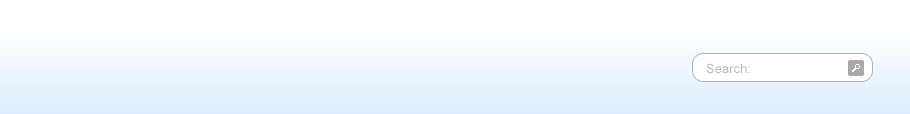
<style>
.page{position:relative;width:910px;height:114px;background:#ffffff}
.page>*{position:absolute;margin:0}
.t1{font:12.5px "ArialMT";letter-spacing:0.025em;color:#b6b7b7}
</style>
<div class="page">
<p class="t1" style="left:706px;top:63px;width:44px;height:11px">Search:</p>
</div>
